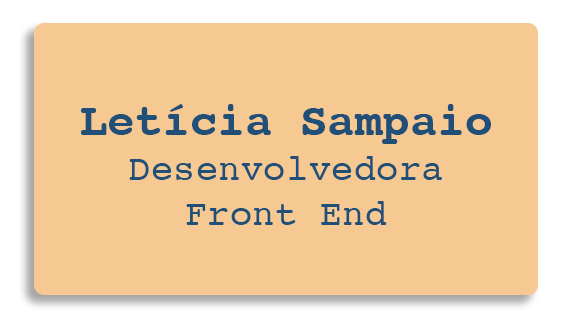
<style>
.page{position:relative;width:567px;height:320px;background:#f7c992}
.page>*{position:absolute;margin:0}
.t1{font:37.5px "Courier";color:#204f78}
.t2{font:45.8px "Courier-Bold";color:#204f78}
</style>
<div class="page">
<p class="t1" style="left:81px;top:104px;width:410px;height:121px;text-align:center"><span class="t2">Letícia Sampaio<br></span>Desenvolvedora<br>Front End</p>
</div>
